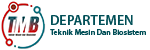
<style>
.page{position:relative;width:150px;height:50px;background:#ffffff}
.page>*{position:absolute;margin:0}
.t1{font:14px "MyriadPro-Semibold";color:#004e56}
.t2{font:8px "MyriadPro-Semibold";color:#004e56}
</style>
<div class="page">
<p class="t1" style="left:51px;top:15px;width:82px;height:10px">DEPARTEMEN</p>
<p class="t2" style="left:50px;top:29px;width:96px;height:6px">Teknik Mesin Dan Biosistem</p>
</div>
